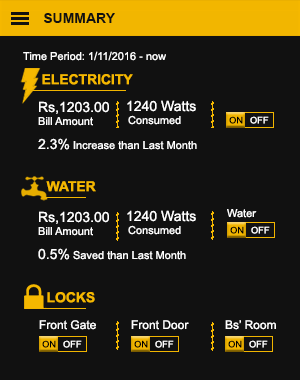
<style>
.page{position:relative;width:300px;height:380px;background:#111111}
.page>*{position:absolute;margin:0}
.t1{font:14px "Arial-BoldMT";color:#111111}
.t2{font:11px "ArialMT";color:#ffffff}
.t3{font:13.9px "Arial-BoldMT";color:#f5b800}
.t4{font:14px "ArialMT";color:#ffffff}
.t5{font:9.1px "ArialMT";color:#000000}
.t6{font:9.1px "ArialMT";color:#ffffff}
.t7{font:12px "ArialMT";color:#ffffff}
</style>
<div class="page">
<p class="t1" style="left:44px;top:13px;width:71px;height:10px">SUMMARY</p>
<p class="t2" style="left:23px;top:51px;width:143px;height:10px">Time Period: 1/11/2016 - now</p>
<p class="t3" style="left:42px;top:74px;width:91px;height:11px">ELECTRICITY</p>
<p class="t4" style="left:39px;top:101px;width:70px;height:13px">Rs,1203.00</p>
<p class="t4" style="left:127px;top:100px;width:69px;height:12px">1240 Watts</p>
<p class="t2" style="left:38px;top:117px;width:55px;height:9px">Bill Amount</p>
<p class="t2" style="left:128px;top:115px;width:53px;height:10px">Consumed</p>
<p class="t5" style="left:229px;top:116px;width:14px;height:8px">ON</p>
<p class="t6" style="left:250px;top:116px;width:19px;height:8px">OFF</p>
<p class="t2" style="left:38px;top:138px;width:159px;height:12px"><span class="t4">2.3%</span> Increase than Last Month</p>
<p class="t3" style="left:46px;top:181px;width:50px;height:11px">WATER</p>
<p class="t2" style="left:227px;top:209px;width:30px;height:9px">Water</p>
<p class="t4" style="left:39px;top:211px;width:70px;height:13px">Rs,1203.00</p>
<p class="t4" style="left:127px;top:210px;width:69px;height:12px">1240 Watts</p>
<p class="t2" style="left:38px;top:227px;width:55px;height:9px">Bill Amount</p>
<p class="t2" style="left:128px;top:225px;width:53px;height:10px">Consumed</p>
<p class="t5" style="left:230px;top:226px;width:14px;height:8px">ON</p>
<p class="t6" style="left:251px;top:226px;width:19px;height:8px">OFF</p>
<p class="t2" style="left:38px;top:248px;width:148px;height:12px"><span class="t4">0.5%</span> Saved than Last Month</p>
<p class="t3" style="left:47px;top:292px;width:48px;height:11px">LOCKS</p>
<p class="t7" style="left:39px;top:320px;width:57px;height:10px">Front Gate</p>
<p class="t7" style="left:131px;top:320px;width:58px;height:10px">Front Door</p>
<p class="t7" style="left:225px;top:320px;width:51px;height:10px">Bs’ Room</p>
<p class="t5" style="left:42px;top:340px;width:14px;height:8px">ON</p>
<p class="t6" style="left:63px;top:340px;width:19px;height:8px">OFF</p>
<p class="t5" style="left:134px;top:340px;width:14px;height:8px">ON</p>
<p class="t6" style="left:155px;top:340px;width:19px;height:8px">OFF</p>
<p class="t5" style="left:228px;top:340px;width:14px;height:8px">ON</p>
<p class="t6" style="left:249px;top:340px;width:19px;height:8px">OFF</p>
</div>
